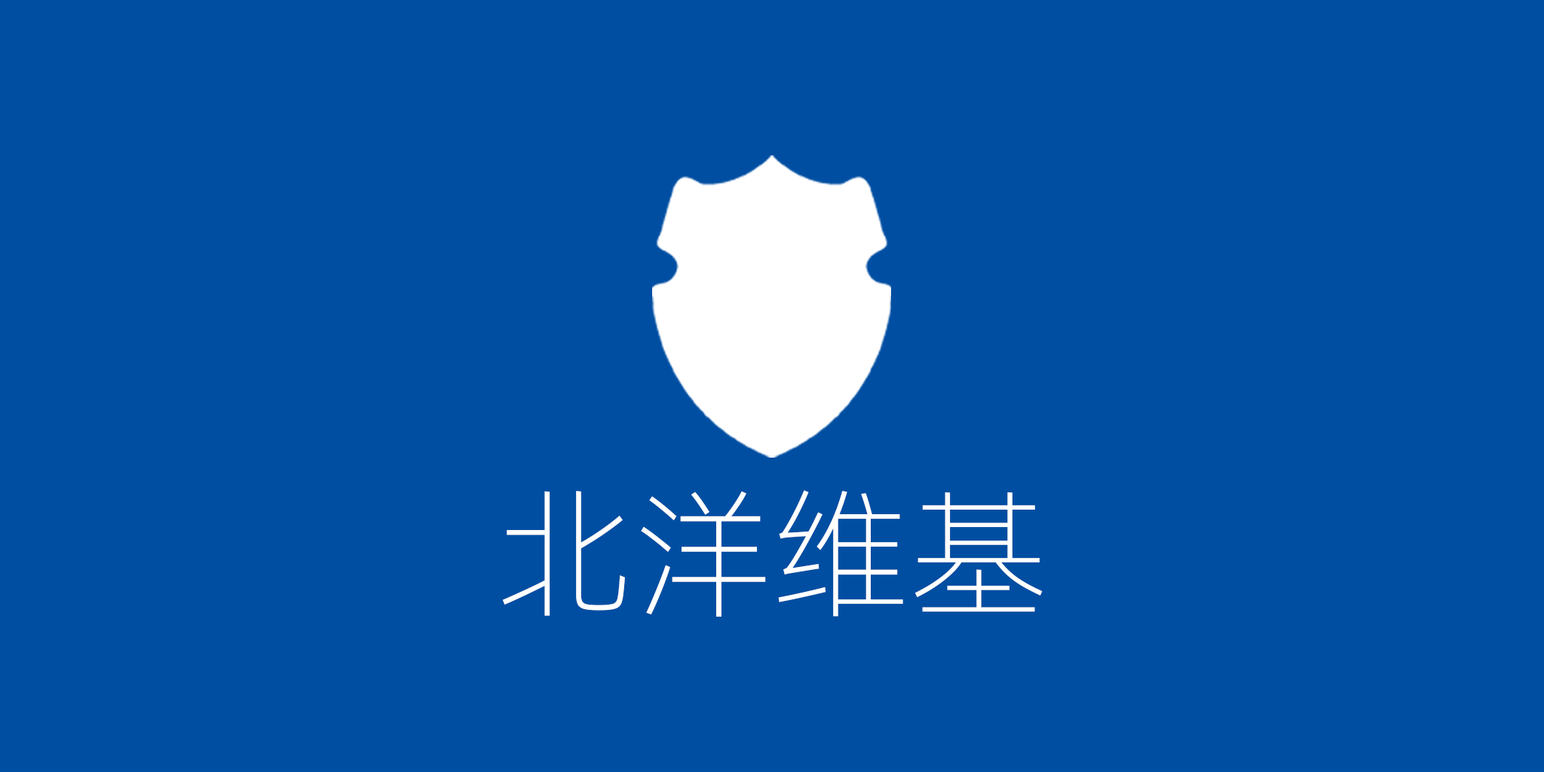
<style>
.page{position:relative;width:1544px;height:772px;background:#004ea2}
.page>*{position:absolute;margin:0}
.t1{font:140.2px "Alibaba-PuHuiTi-L";color:#ffffff}
</style>
<div class="page">
<p class="t1" style="left:502px;top:490px;width:541px;height:127px">北洋维基</p>
</div>
